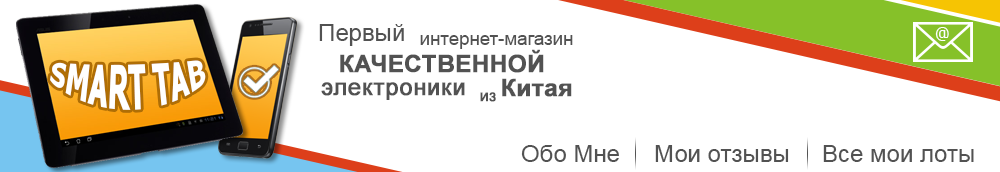
<style>
.page{position:relative;width:1000px;height:172px;background:#ffffff}
.page>*{position:absolute;margin:0}
.t1{font:24px "ArialMT";color:#525252}
.t2{font:16.6px "Tahoma";color:#ffffff}
.t3{font:18.7px "ArialMT";color:#525252}
.t4{font:24px "Arial-BoldMT";color:#525252;font-weight:bold}
.t5{font:26.7px "Tahoma-Bold";color:#ffffff}
.t6{font:24px "ArialMT";color:#525252;font-weight:bold}
.t7{font:16px "ArialMT";color:#525252;font-weight:bold}
</style>
<div class="page">
<p class="t1" style="left:319px;top:24px;width:85px;height:22px">Первый</p>
<p class="t2" style="left:935px;top:27px;width:14px;height:14px">@</p>
<p class="t3" style="left:420px;top:35px;width:153px;height:14px">интернет-магазин</p>
<p class="t4" style="left:340px;top:49px;width:204px;height:24px">КАЧЕСТВЕННОЙ</p>
<p class="t5" style="left:50px;top:60px;width:156px;height:50px">SMART TAB</p>
<p class="t4" style="left:502px;top:78px;width:70px;height:19px">Китая</p>
<p class="t6" style="left:321px;top:82px;width:144px;height:18px">электроники</p>
<p class="t7" style="left:480px;top:92px;width:16px;height:10px">из</p>
<p class="t1" style="left:521px;top:145px;width:98px;height:17px">Обо Мне</p>
<p class="t1" style="left:655px;top:145px;width:134px;height:17px">Мои отзывы</p>
<p class="t1" style="left:823px;top:145px;width:151px;height:17px">Все мои лоты</p>
</div>
